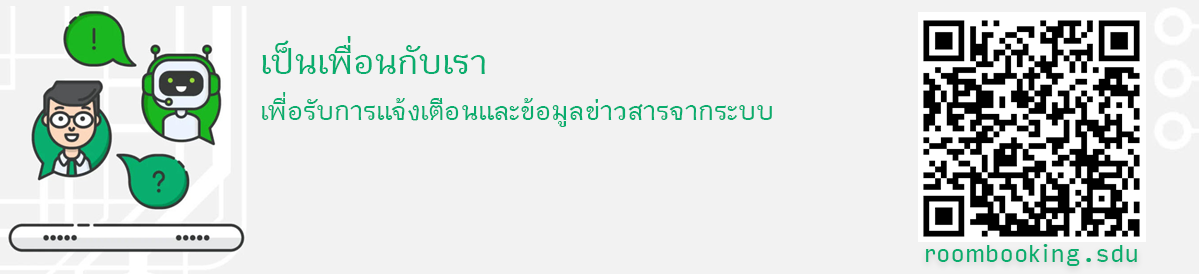
<style>
.page{position:relative;width:1199px;height:274px;background:#f2f2f2}
.page>*{position:absolute;margin:0}
.t1{font:48px "THKrub-Bold";color:#09ad6e}
.t2{font:36px "THKrub-Bold";color:#09ad6e}
.t3{font:24px "InputSansNarrow-Regular";color:#09ad6e}
</style>
<div class="page">
<p class="t1" style="left:262px;top:36px;width:223px;height:38px">เป็นเพื่อนกับเรา</p>
<p class="t2" style="left:262px;top:92px;width:510px;height:35px">เพื่อรับการแจ้งเตือนและข้อมูลข่าวสารจากระบบ</p>
<p class="t3" style="left:926px;top:244px;width:211px;height:22px">roombooking.sdu</p>
</div>
